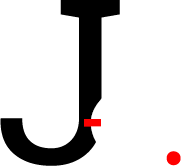
<style>
.page{position:relative;width:181px;height:166px;background:#ffffff}
.page>*{position:absolute;margin:0}
.t1{font:229.7px "RobotoSlab-Regular";color:#000000}
.t2{font:166.1px "SegoeUI-Light";color:#fe0000;scale:0.38 1}
.t3{font:172.9px "SegoeUI-Light";color:#fe0000}
</style>
<div class="page">
<p class="t1" style="left:0px;top:0px;width:120px;height:166px">J</p>
<p class="t2" style="left:84px;top:119px;width:17px;height:8px">-</p>
<p class="t3" style="left:166px;top:151px;width:15px;height:15px">.</p>
</div>
